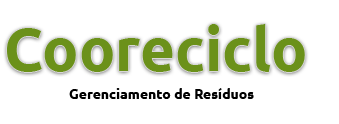
<style>
.page{position:relative;width:339px;height:124px;background:#ffffff}
.page>*{position:absolute;margin:0}
.t1{font:60px "Ubuntu-Bold";color:#6b911a}
.t2{font:14px "Ubuntu-Bold";color:#000000}
</style>
<div class="page">
<p class="t1" style="left:7px;top:24px;width:298px;height:48px">Cooreciclo</p>
<p class="t2" style="left:69px;top:88px;width:185px;height:11px">Gerenciamento de Resíduos</p>
</div>
